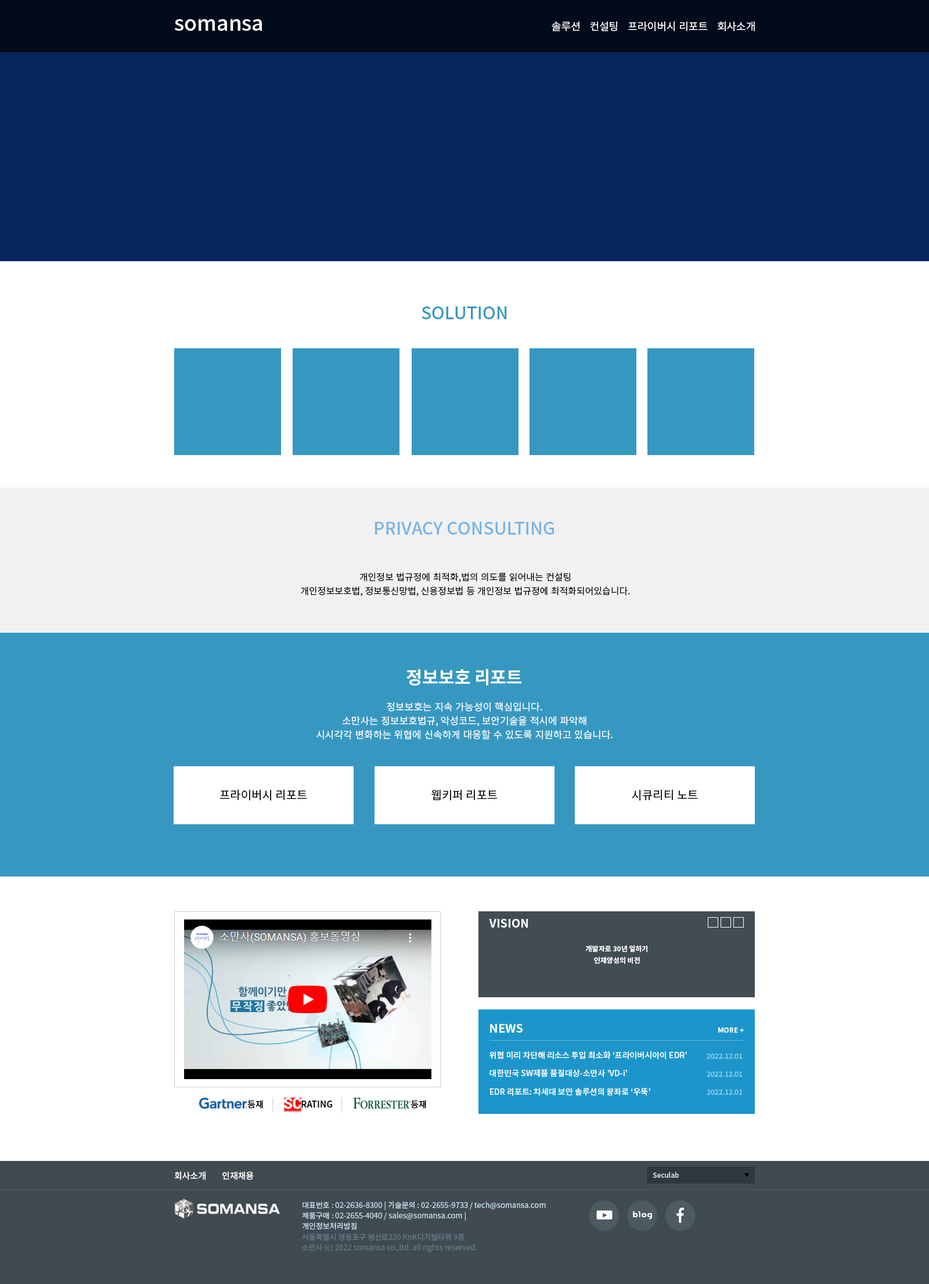
<style>
.page{position:relative;width:929px;height:1284px;background:#ffffff}
.page>*{position:absolute;margin:0}
.t1{font:20.9px "NotoSansKR-Medium";color:#ffffff}
.t2{font:10.5px "NotoSansKR-Regular";color:#ffffff}
.t3{font:17.4px "NotoSansKR-Medium";color:#3698c1}
.t4{font:17.4px "NotoSansKR-Medium";color:#77b3e4}
.t5{font:9.3px/13.9px "NotoSansKR-Regular";color:#000000}
.t6{font:17.4px "NotoSansKR-Bold";color:#fffefe}
.t7{font:9.9px/13.9px "NotoSansKR-Regular";color:#fffefe}
.t8{font:11.6px "NotoSansKR-Regular";color:#000000}
.t9{font:11.6px "NotoSansKR-Bold";color:#fffefe}
.t10{font:7px/11.6px "NotoSansKR-Bold";color:#fffefe}
.t11{font:7px "NotoSansKR-Bold";color:#fffefe}
.t12{font:8.1px "NotoSansKR-Medium";color:#fffefe}
.t13{font:7px "NotoSansKR-Medium";color:#97d0e9}
.t14{font:8.7px "NotoSansKR-Medium";color:#fffefe}
.t15{font:7px "NotoSansKR-Medium";color:#dddddd}
.t16{font:7.5px/10.5px "NotoSansKR-Regular";color:#cae1ee}
.t17{font:7.5px/10.5px "NotoSansKR-Regular";color:#647b87}
</style>
<div class="page">
<p class="t1" style="left:175px;top:19px;width:87px;height:12px">somansa</p>
<p class="t2" style="left:552px;top:21px;width:203px;height:10px">솔루션    컨설팅    프라이버시 리포트    회사소개</p>
<p class="t3" style="left:422px;top:307px;width:85px;height:12px">SOLUTION</p>
<p class="t4" style="left:375px;top:522px;width:179px;height:13px">PRIVACY CONSULTING</p>
<p class="t5" style="left:301px;top:573px;width:329px;height:23px;text-align:center">개인정보 법규정에 최적화,법의 의도를 읽어내는 컨설팅<br>개인정보보호법, 정보통신망법, 신용정보법 등 개인정보 법규정에 최적화되어있습니다.</p>
<p class="t6" style="left:406px;top:669px;width:115px;height:17px">정보보호 리포트</p>
<p class="t7" style="left:316px;top:702px;width:297px;height:38px;text-align:center">정보보호는 지속 가능성이 핵심입니다.<br>소만사는 정보보호법규, 악성코드, 보안기술을 적시에 파악해<br>시시각각 변화하는 위협에 신속하게 대응할 수 있도록 지원하고 있습니다.</p>
<p class="t8" style="left:219px;top:790px;width:88px;height:11px">프라이버시 리포트</p>
<p class="t8" style="left:431px;top:790px;width:67px;height:11px">웹키퍼 리포트</p>
<p class="t8" style="left:632px;top:790px;width:66px;height:11px">시큐리티 노트</p>
<p class="t9" style="left:489px;top:919px;width:39px;height:9px">VISION</p>
<p class="t10" style="left:585px;top:945px;width:62px;height:19px;text-align:center">개발자로 30년 일하기<br>인재양성의 비전</p>
<p class="t9" style="left:490px;top:1024px;width:33px;height:9px">NEWS</p>
<p class="t11" style="left:718px;top:1028px;width:26px;height:5px">MORE +</p>
<p class="t12" style="left:489px;top:1052px;width:198px;height:8px">위협 미리 차단해 리소스 투입 최소화 ‘프라이버시아이 EDR’</p>
<p class="t13" style="left:707px;top:1054px;width:36px;height:5px">2022.12.01</p>
<p class="t12" style="left:489px;top:1070px;width:138px;height:8px">대한민국 SW제품 품질대상-소만사 'VD-i'</p>
<p class="t13" style="left:707px;top:1072px;width:36px;height:5px">2022.12.01</p>
<p class="t12" style="left:490px;top:1088px;width:160px;height:8px">EDR 리포트: 차세대 보안 솔루션의 왕좌로 ‘우뚝’</p>
<p class="t13" style="left:707px;top:1090px;width:36px;height:5px">2022.12.01</p>
<p class="t14" style="left:175px;top:1172px;width:79px;height:8px">회사소개        인재채용</p>
<p class="t15" style="left:653px;top:1172px;width:26px;height:6px">Seculab</p>
<p class="t16" style="left:302px;top:1201px;width:244px;height:29px">대표번호 : 02-2636-8300 | 기술문의 : 02-2655-9733 / tech@somansa.com<br>제품구매 : 02-2655-4040 / sales@somansa.com |<br>개인정보처리방침</p>
<p class="t17" style="left:302px;top:1233px;width:175px;height:19px">서울특별시 영등포구 영신로220 KnK디지털타워 9층<br>소만사 (c) 2022 somansa co.,ltd. all rights reserved.</p>
</div>
